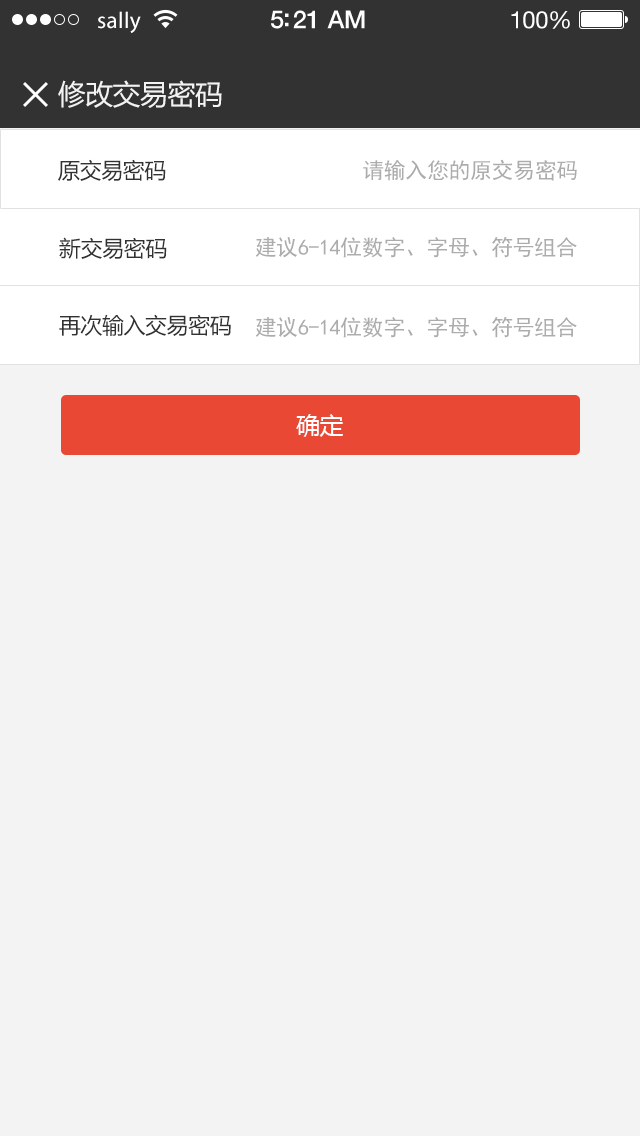
<style>
.page{position:relative;width:640px;height:1136px;background:#f3f3f3}
.page>*{position:absolute;margin:0}
.t1{font:23px "MyriadPro-Regular";letter-spacing:0.02em;color:#ffffff}
.t2{font:25px "HelveticaNeue-Medium";letter-spacing:-0.02em;color:#ffffff}
.t3{font:24px "HelveticaNeue";letter-spacing:-0.02em;color:#ffffff}
.t4{font:28px "MicrosoftYaHei";letter-spacing:-0.02em;color:#f3f3f3}
.t5{font:22px "MicrosoftYaHei";letter-spacing:-0.02em;color:#323232}
.t6{font:22px "SimHei";letter-spacing:-0.02em;color:#acacac}
.t7{font:24px "MicrosoftYaHei";letter-spacing:-0.02em;color:#ffffff}
</style>
<div class="page">
<p class="t1" style="left:98px;top:11px;width:43px;height:22px">sally</p>
<p class="t2" style="left:271px;top:10px;width:94px;height:19px">5:21 AM</p>
<p class="t3" style="left:511px;top:11px;width:59px;height:18px">100%</p>
<p class="t4" style="left:58px;top:80px;width:164px;height:28px">修改交易密码</p>
<p class="t5" style="left:58px;top:159px;width:108px;height:22px">原交易密码</p>
<p class="t6" style="left:363px;top:159px;width:214px;height:22px">请输入您的原交易密码</p>
<p class="t5" style="left:59px;top:237px;width:108px;height:22px">新交易密码</p>
<p class="t6" style="left:255px;top:236px;width:322px;height:22px">建议6-14位数字、字母、符号组合</p>
<p class="t5" style="left:59px;top:314px;width:172px;height:22px">再次输入交易密码</p>
<p class="t6" style="left:255px;top:316px;width:322px;height:22px">建议6-14位数字、字母、符号组合</p>
<p class="t7" style="left:296px;top:414px;width:47px;height:23px">确定</p>
</div>
